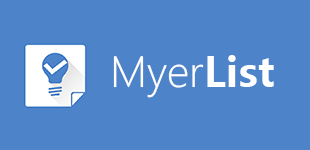
<style>
.page{position:relative;width:310px;height:150px;background:#4c83c9}
.page>*{position:absolute;margin:0}
.t1{font:40.4px "FZDX--GB1-4";color:#ffffff}
.t2{font:40.4px "MicrosoftYaHeiUI-Bold";color:#ffffff}
</style>
<div class="page">
<p class="t1" style="left:113px;top:55px;width:161px;height:43px">Myer<span class="t2">List</span></p>
</div>
